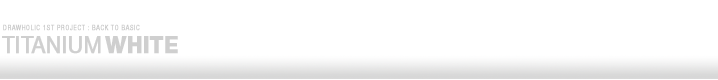
<style>
.page{position:relative;width:718px;height:80px;background:#ffffff}
.page>*{position:absolute;margin:0}
.t1{font:7.3px "HelveticaNeue-Condensed";letter-spacing:0.04em;color:#c9c9c9;font-weight:bold}
.t2{font:23px "HelveticaNeue-Roman";letter-spacing:0.01em;color:#cfcfcf;font-weight:bold;scale:0.9 1}
.t3{font:23px "HelveticaNeue-Heavy";letter-spacing:0.01em;color:#cfcfcf;font-weight:bold;scale:0.9 1}
</style>
<div class="page">
<p class="t1" style="left:3px;top:24px;width:137px;height:7px">DRAWHOLIC 1ST PROJECT : BACK TO BASIC</p>
<p class="t2" style="left:2px;top:36px;width:176px;height:18px">TITANIUM <span class="t3">WHITE</span></p>
</div>
